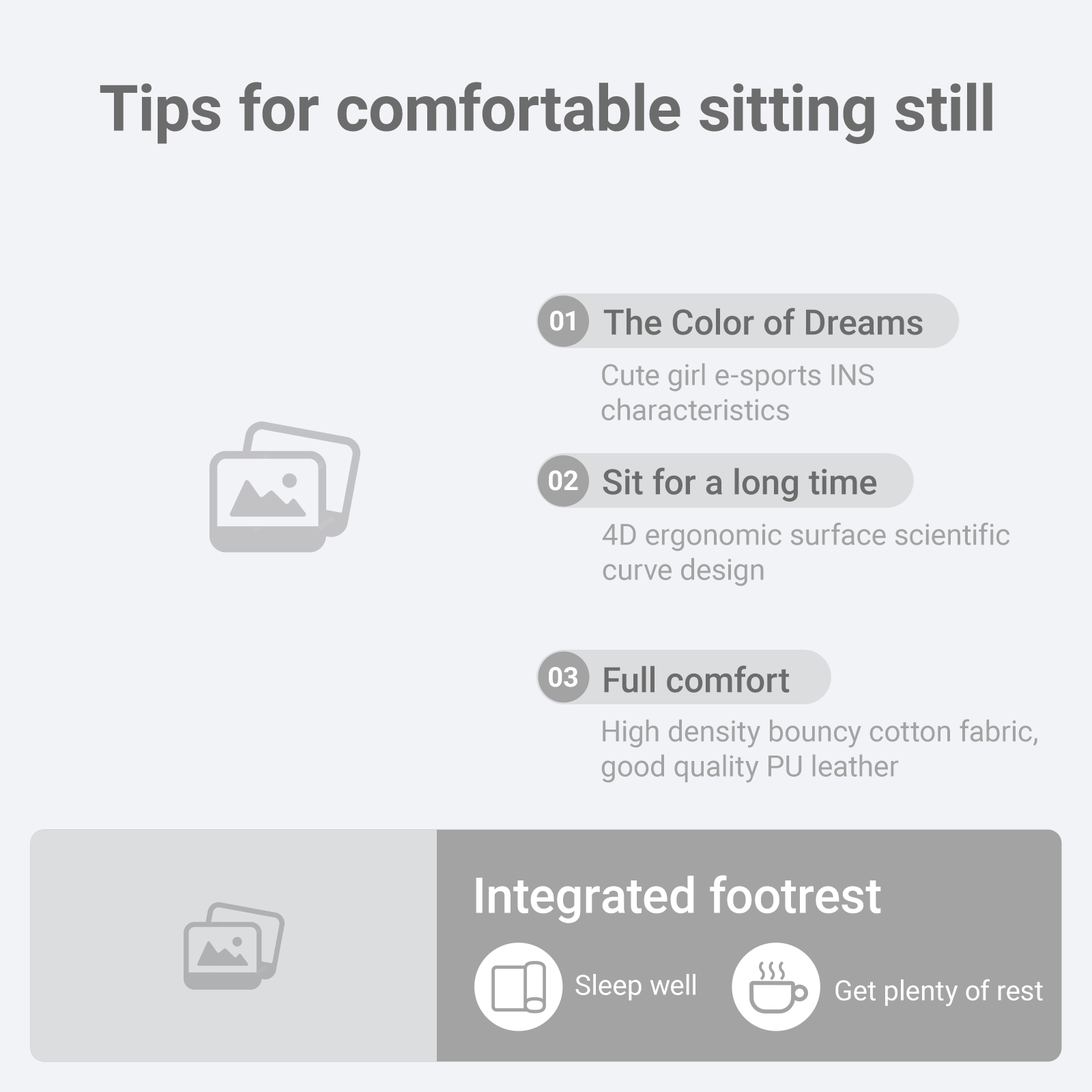
<style>
.page{position:relative;width:1092px;height:1092px;background:#f2f3f6}
.page>*{position:absolute;margin:0}
.t1{font:64.1px "Roboto-Bold";color:#6c6c6c}
.t2{font:27.3px "Roboto-Bold";color:#ffffff}
.t3{font:34.9px "Roboto-Medium";color:#6c6c6c}
.t4{font:29.1px "Roboto-Regular";color:#a3a3a3}
.t5{font:49.5px "Roboto-Medium";color:#ffffff}
.t6{font:27.7px "Roboto-Regular";color:#ffffff}
</style>
<div class="page">
<p class="t1" style="left:100px;top:82px;width:892px;height:62px">Tips for comfortable sitting still</p>
<p class="t2" style="left:550px;top:311px;width:25px;height:20px">01</p>
<p class="t3" style="left:603px;top:308px;width:320px;height:27px">The Color of Dreams</p>
<p class="t4" style="left:601px;top:363px;width:273px;height:57px">Cute girl e-sports INS <br>characteristics</p>
<p class="t2" style="left:549px;top:470px;width:29px;height:21px">02</p>
<p class="t3" style="left:603px;top:468px;width:274px;height:34px">Sit for a long time</p>
<p class="t4" style="left:602px;top:522px;width:407px;height:64px">4D ergonomic surface scientific <br>curve design</p>
<p class="t3" style="left:604px;top:665px;width:186px;height:28px">Full comfort</p>
<p class="t2" style="left:549px;top:667px;width:28px;height:20px">03</p>
<p class="t4" style="left:601px;top:719px;width:436px;height:64px">High density bouncy cotton fabric, <br>good quality PU leather</p>
<p class="t5" style="left:476px;top:875px;width:405px;height:48px">Integrated footrest</p>
<p class="t6" style="left:575px;top:974px;width:120px;height:27px">Sleep well</p>
<p class="t6" style="left:835px;top:979px;width:208px;height:28px">Get plenty of rest</p>
</div>
